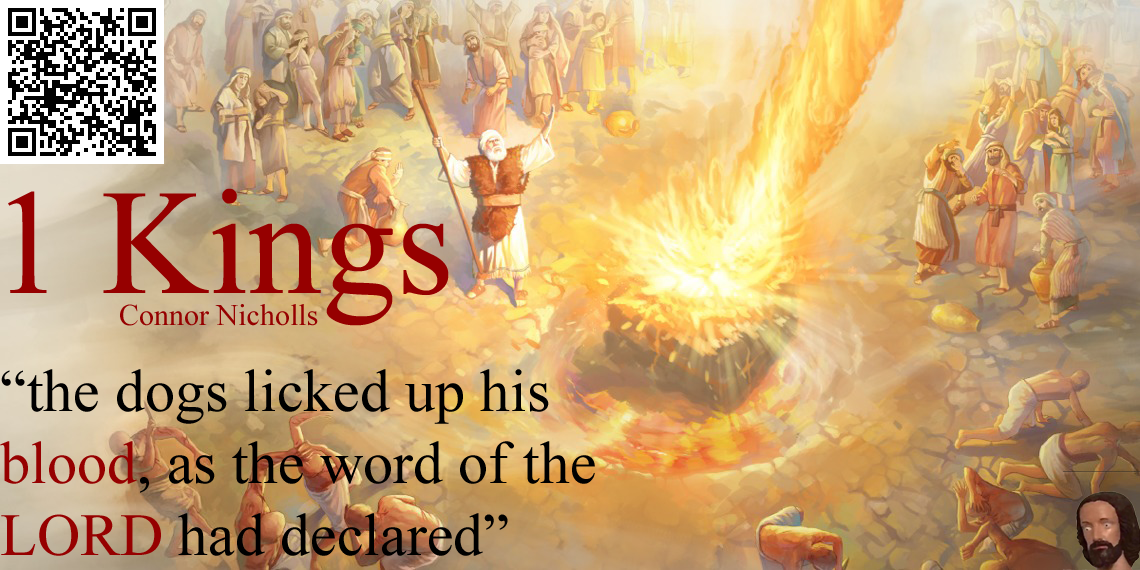
<style>
.page{position:relative;width:1140px;height:570px}
.page>*{position:absolute;margin:0}
.t1{font:150px "TimesNewRomanPSMT";color:#960000}
.t2{font:30px "TimesNewRomanPSMT";color:#960000}
.t3{font:60px "TimesNewRomanPSMT";color:#000000}
.t4{font:60px "TimesNewRomanPSMT";color:#960000}
</style>
<div class="page">
<p class="t1" style="left:8px;top:188px;width:441px;height:138px">1 Kings</p>
<p class="t2" style="left:120px;top:304px;width:198px;height:22px">Connor Nicholls</p>
<p class="t3" style="left:0px;top:369px;width:595px;height:187px">“the dogs licked up his <br><span class="t4">blood</span>, as the word of the <br><span class="t4">LORD</span> had declared”</p>
</div>
